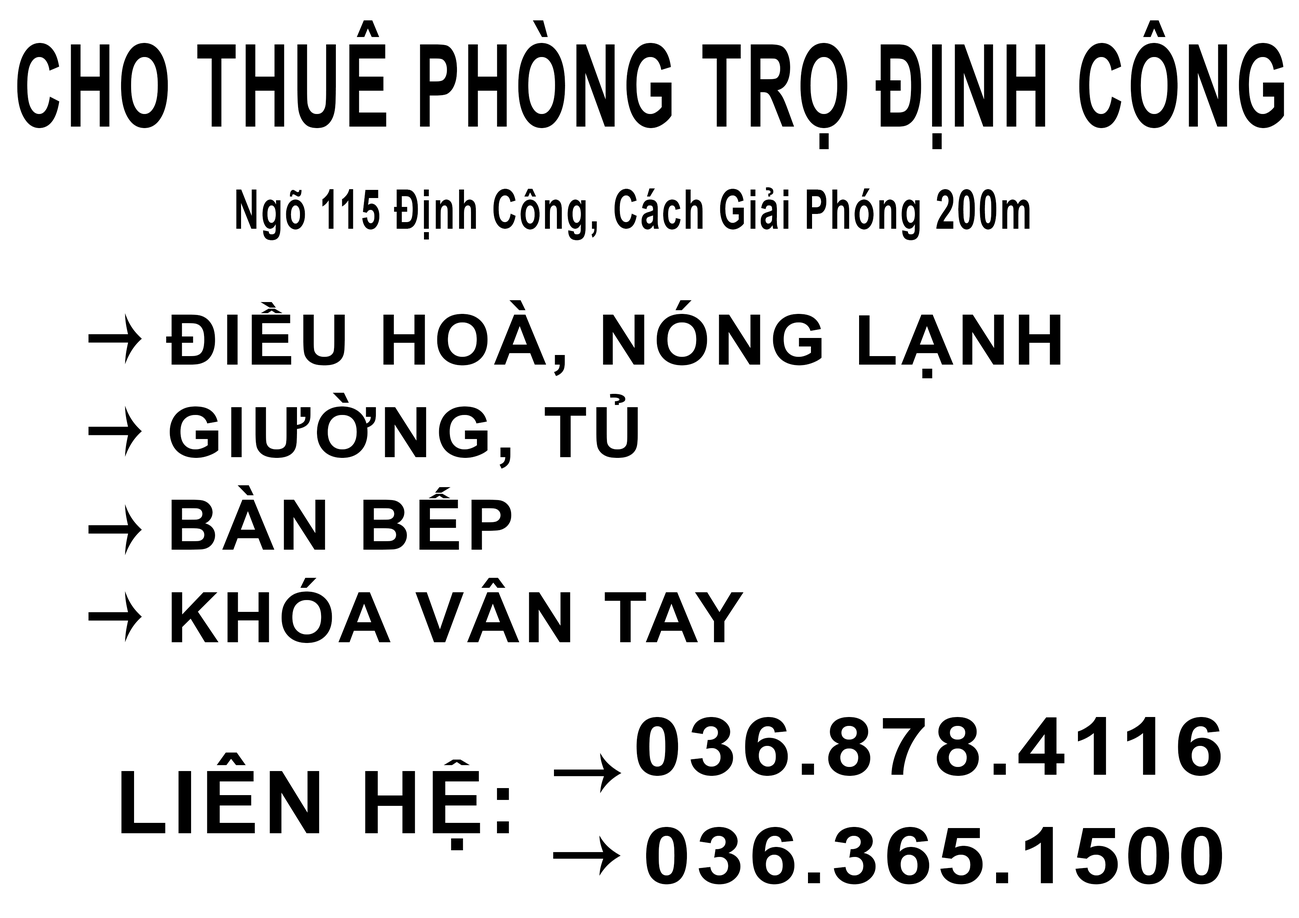
<style>
.page{position:relative;width:1299px;height:918px;background:#ffffff}
.page>*{position:absolute;margin:0}
.t1{font:114.7px "Arial-BoldMT";letter-spacing:0.05em;color:#000000;scale:0.59 1}
.t2{font:54.8px "Arial-BoldMT";letter-spacing:0.05em;color:#000000;scale:0.65 1}
.t3{font:69.4px/23.1px "Arial-BoldMT";letter-spacing:0.05em;color:#000000;scale:1.04 1}
.t4{font:79.9px "Arial-BoldMT";letter-spacing:0.05em;color:#000000;scale:1.12 1}
.t5{font:86.9px "Arial-BoldMT";letter-spacing:0.05em;color:#000000}
.t6{font:78.3px "Arial-BoldMT";letter-spacing:0.05em;color:#000000;scale:1.12 1}
</style>
<div class="page">
<p class="t1" style="left:17px;top:20px;width:1267px;height:129px">CHO THUÊ PHÒNG TRỌ ĐỊNH CÔNG</p>
<p class="t2" style="left:236px;top:187px;width:794px;height:53px">Ngõ 115 Định Công, Cách Giải Phóng 200m</p>
<p class="t3" style="left:166px;top:300px;width:894px;height:343px">ĐIỀU HOÀ, NÓNG LẠNH<br><br><br><br>GIƯỜNG, TỦ<br><br><br><br>BÀN BẾP<br><br><br><br>KHÓA VÂN TAY</p>
<p class="t4" style="left:636px;top:717px;width:585px;height:59px">036.878.4116</p>
<p class="t5" style="left:121px;top:753px;width:388px;height:97px">LIÊN HỆ:</p>
<p class="t6" style="left:646px;top:827px;width:576px;height:57px">036.365.1500</p>
</div>
